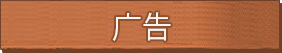
<style>
.page{position:relative;width:282px;height:53px}
.page>*{position:absolute;margin:0}
.t1{font:30px "KozGoPr6N-Regular";color:#f8f3f1}
</style>
<div class="page">
<p class="t1" style="left:112px;top:12px;width:59px;height:29px">广告</p>
</div>
